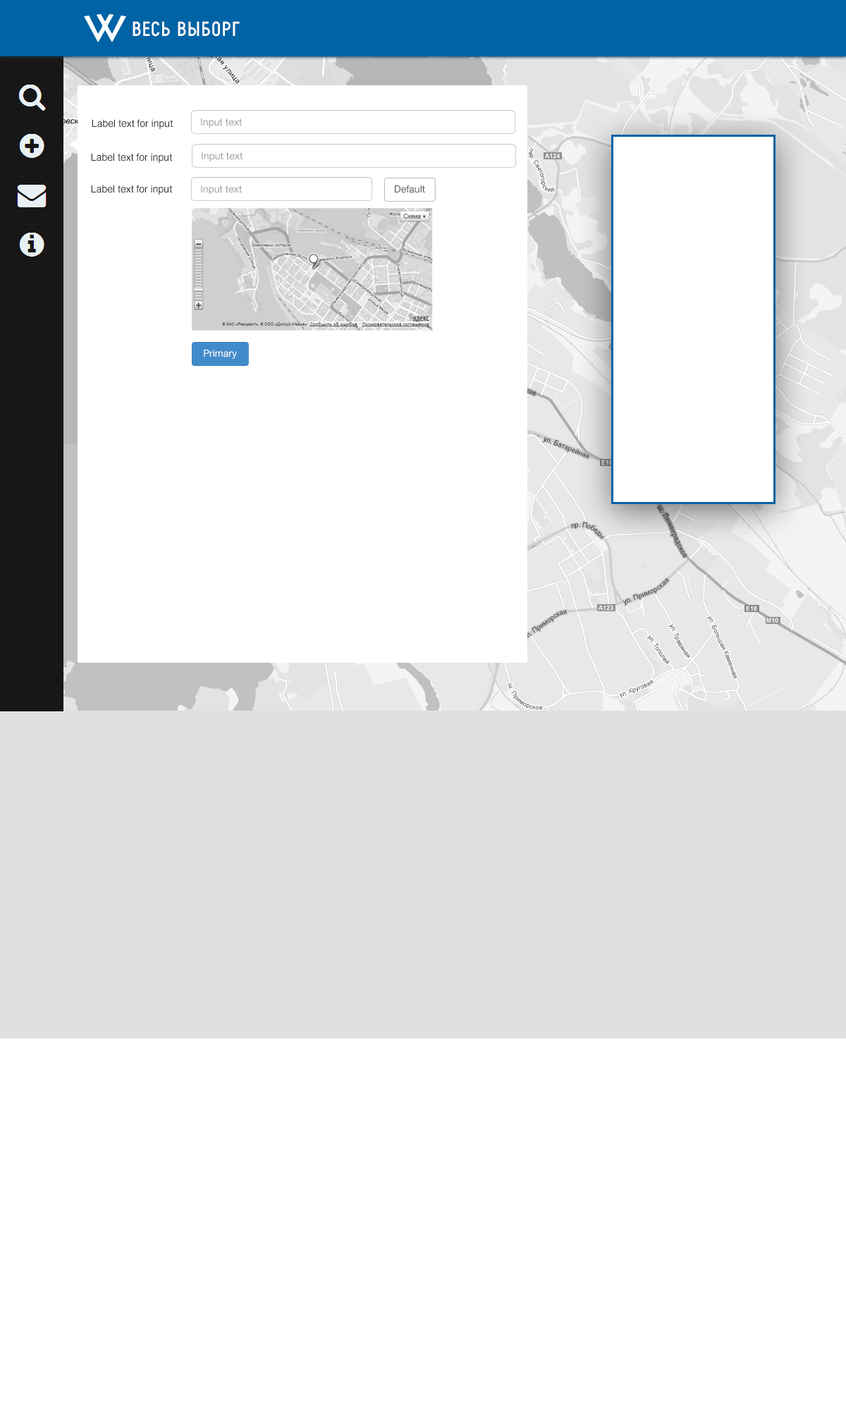
<style>
.page{position:relative;width:846px;height:1410px;background:#ffffff}
.page>*{position:absolute;margin:0}
.t1{font:19.7px "ProbelC";letter-spacing:0.075em;color:#ffffff;text-transform:uppercase}
.t2{font:19.7px "ProbelC";letter-spacing:0.1em;color:#ffffff;text-transform:uppercase}
.t3{font:9.9px "Helvetica";color:#333333}
.t4{font:9.9px "HelveticaNeue";color:#9e9e9e}
.t5{font:9.9px "HelveticaNeue";color:#585858}
.t6{font:9.9px "HelveticaNeue";color:#ffffff}
</style>
<div class="page">
<p class="t1" style="left:133px;top:21px;width:107px;height:16px">весь в<span class="t2">ы</span>борг</p>
<p class="t3" style="left:92px;top:119px;width:81px;height:10px">Label text for input</p>
<p class="t4" style="left:201px;top:118px;width:41px;height:10px">Input text</p>
<p class="t3" style="left:91px;top:153px;width:81px;height:10px">Label text for input</p>
<p class="t4" style="left:202px;top:152px;width:40px;height:9px">Input text</p>
<p class="t3" style="left:91px;top:185px;width:81px;height:10px">Label text for input</p>
<p class="t4" style="left:201px;top:185px;width:41px;height:10px">Input text</p>
<p class="t5" style="left:395px;top:185px;width:30px;height:8px">Default</p>
<p class="t6" style="left:204px;top:350px;width:33px;height:9px">Primary</p>
</div>
